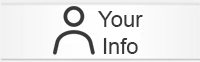
<style>
.page{position:relative;width:200px;height:62px}
.page>*{position:absolute;margin:0}
.t1{font:22px "ArialMT";color:#383838}
</style>
<div class="page">
<p class="t1" style="left:98px;top:11px;width:45px;height:43px;text-align:center">Your<br>Info</p>
</div>
